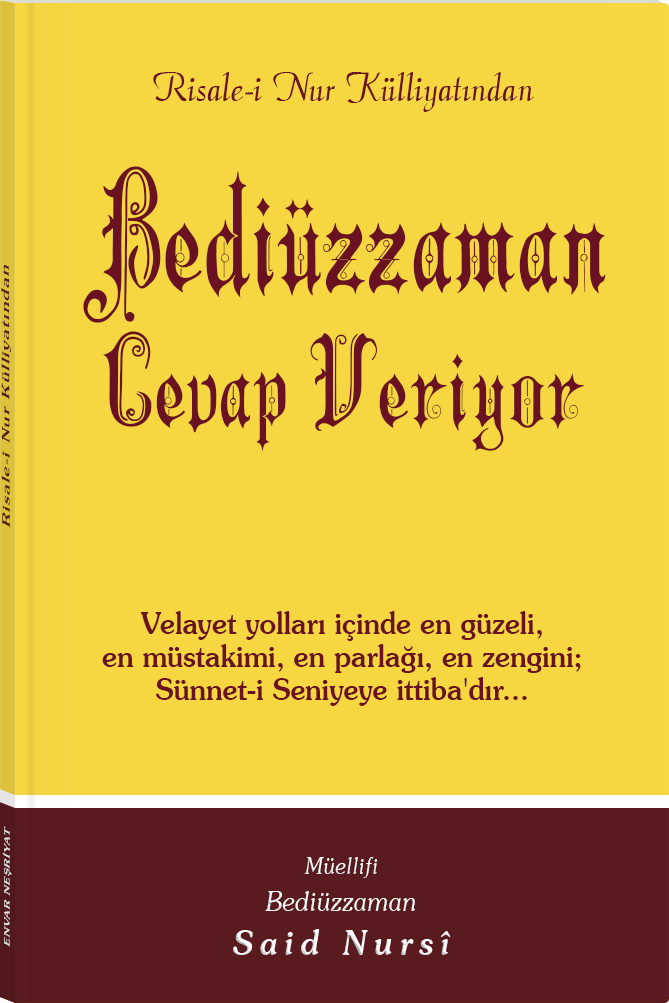
<style>
.page{position:relative;width:669px;height:1003px;background:#f6d742}
.page>*{position:absolute;margin:0}
.t1{font:45.3px "Barla © 072 Aria ScriptScriptSSi";color:#6b1323;scale:0.94 1}
.t2{font:122.9px/136px "Barla © 001 Liva Nur";letter-spacing:-0.001em;color:#6b1222;scale:0.93 1}
.t3{font:157.9px/123px "Barla © 001 Liva Nur";letter-spacing:-0.001em;color:#6b1222;scale:0.93 1}
.t4{font:11.4px "Souvenir-Medium";letter-spacing:0.08em;color:#5a1b20;scale:1.65 1}
.t5{font:30.3px/33px "Souvenir-Medium";color:#6b1222;scale:0.92 1}
.t6{font:8.3px "Souvenir-Medium";letter-spacing:0.08em;color:#e5e5e5;scale:1.43 1}
.t7{font:27.1px/37.8px "Souvenir-LightItalic";color:#ffffff;scale:0.92 1}
.t8{font:22.8px/39.8px "Souvenir-LightItalic";color:#ffffff;scale:0.92 1}
.t9{font:33.9px/43.8px "Souvenir-MediumItalic";letter-spacing:0.2em;color:#ffffff;scale:0.92 1}
</style>
<div class="page">
<p class="t1" style="left:153px;top:72px;width:381px;height:40px">Risale-i Nur Külliyatından</p>
<p class="t2" style="left:83px;top:166px;width:523px;height:285px;text-align:center"><span class="t3">Bediüzzaman<br></span>Cevap Veriyor</p>
<p class="t4" style="left:1px;top:265px;width:10px;height:263px;rotate:-90deg">Risale-i Nur Külliyatından</p>
<p class="t5" style="left:102px;top:611px;width:479px;height:95px;text-align:center">Velayet yolları içinde en güzeli,<br>en müstakimi, en parlağı, en zengini;<br>Sünnet-i Seniyeye ittiba'dır...</p>
<p class="t6" style="left:2px;top:826px;width:10px;height:121px;rotate:-90deg">ENVAR NEŞRİYAT</p>
<p class="t7" style="left:233px;top:857px;width:218px;height:98px;text-align:center"><span class="t8">Müellifi<br></span>Bediüzzaman<br><span class="t9">Said Nursî</span></p>
</div>
